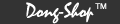
<style>
.page{position:relative;width:120px;height:24px;background:#333333}
.page>*{position:absolute;margin:0}
.t1{font:21px "Mistral";color:#ffffff}
.t2{font:8px "ArialMT";color:#ffffff}
</style>
<div class="page">
<p class="t1" style="left:26px;top:2px;width:68px;height:22px">Dong-Shop</p>
<p class="t2" style="left:95px;top:3px;width:12px;height:6px">TM</p>
</div>
